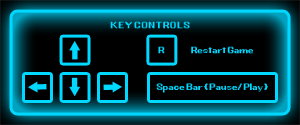
<style>
.page{position:relative;width:300px;height:125px;background:#000000}
.page>*{position:absolute;margin:0}
.t1{font:11.2px "G.B.BOOT";letter-spacing:0.05em;color:#00d8ff}
.t2{font:11.2px "G.B.BOOT";letter-spacing:-0.025em;color:#00d8ff}
</style>
<div class="page">
<p class="t1" style="left:110px;top:21px;width:80px;height:8px">KEY CONTROLS</p>
<p class="t2" style="left:158px;top:46px;width:7px;height:8px">R</p>
<p class="t2" style="left:191px;top:46px;width:62px;height:8px">Restart Game</p>
<p class="t2" style="left:156px;top:83px;width:112px;height:10px">Space Bar ( Pause/ Play )</p>
</div>
